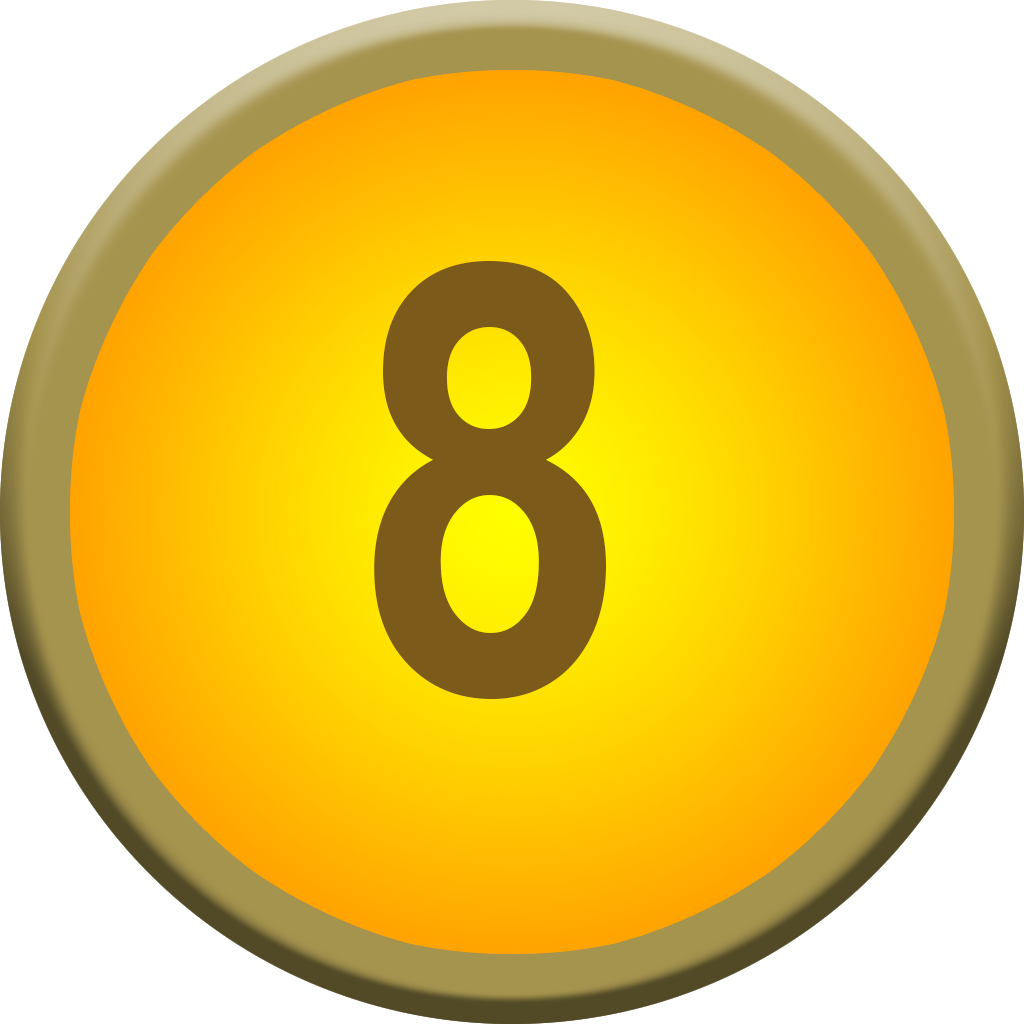
<style>
.page{position:relative;width:1024px;height:1024px;background:#ffffff}
.page>*{position:absolute;margin:0}
.t1{font:600px "ArialNarrow-Bold";color:#7c5a19}
</style>
<div class="page">
<p class="t1" style="left:374px;top:261px;width:232px;height:438px">8</p>
</div>
